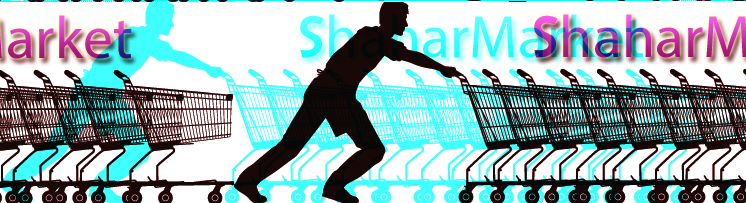
<style>
.page{position:relative;width:746px;height:203px;background:#ffffff}
.page>*{position:absolute;margin:0}
.t1{font:60px "MyriadHebrew-Regular"}
.t2{font:60px "BerlinSansFB-Reg"}
</style>
<div class="page">
<p class="t1" style="left:300px;top:13px;width:344px;height:44px"><span class="t2">S</span>haharMarket</p>
</div>
